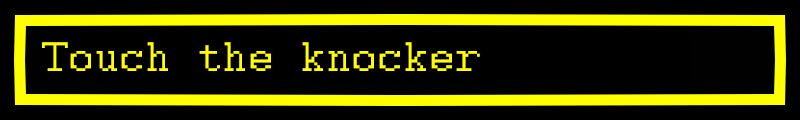
<style>
.page{position:relative;width:800px;height:120px;background:#000000}
.page>*{position:absolute;margin:0}
.t1{font:45.8px "Courier";color:#ffff00}
</style>
<div class="page">
<p class="t1" style="left:42px;top:42px;width:438px;height:29px">Touch the knocker</p>
</div>
